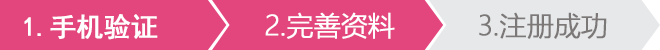
<style>
.page{position:relative;width:660px;height:50px;background:#e3457d}
.page>*{position:absolute;margin:0}
.t1{font:27.1px "SimHei";letter-spacing:-0.025em;color:#ffffff;font-weight:bold}
.t2{font:27.1px "MicrosoftYaHeiLight";letter-spacing:-0.025em;color:#ffffff;font-weight:bold}
.t3{font:27.1px "MicrosoftYaHeiLight";letter-spacing:-0.025em;color:#7d7878;font-weight:bold}
</style>
<div class="page">
<p class="t1" style="left:24px;top:14px;width:134px;height:26px">1.手机验证</p>
<p class="t2" style="left:265px;top:12px;width:130px;height:27px">2.完善资料</p>
<p class="t3" style="left:479px;top:12px;width:128px;height:27px">3.注册成功</p>
</div>
